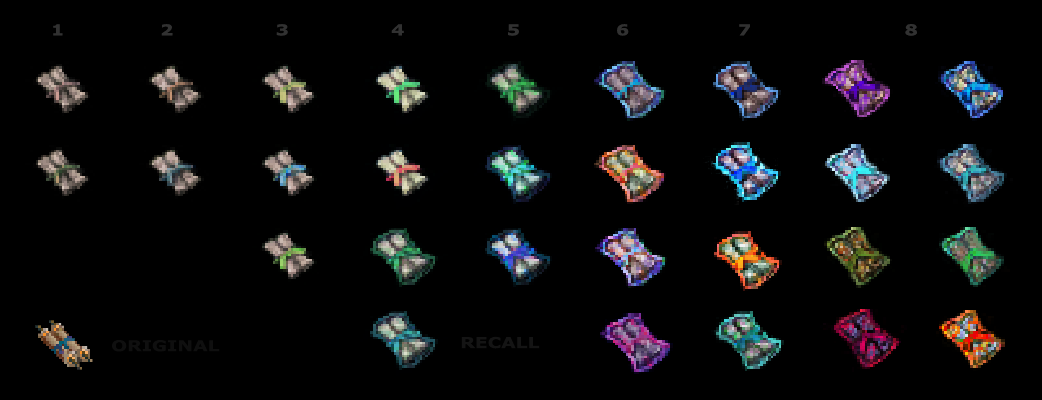
<style>
.page{position:relative;width:1042px;height:400px;background:#000000}
.page>*{position:absolute;margin:0}
.t1{font:15px "Verdana-Bold";color:#313131;scale:1.25 1}
.t2{font:15px "Verdana-Bold";color:#0f0f0f;scale:1.25 1}
.t3{font:15px "Verdana-Bold";color:#141414;scale:1.25 1}
</style>
<div class="page">
<p class="t1" style="left:53px;top:24px;width:864px;height:12px">1               2                3                4                5               6                 7                        8</p>
<p class="t2" style="left:112px;top:340px;width:108px;height:12px">ORIGINAL</p>
<p class="t3" style="left:461px;top:336px;width:79px;height:13px">RECALL</p>
</div>
